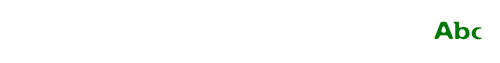
<style>
.page{position:relative;width:500px;height:63px;background:#ffffff}
.page>*{position:absolute;margin:0}
.t1{font:24px "Flexure";color:#007806}
</style>
<div class="page">
<p class="t1" style="left:434px;top:21px;width:48px;height:19px">Abc</p>
</div>
